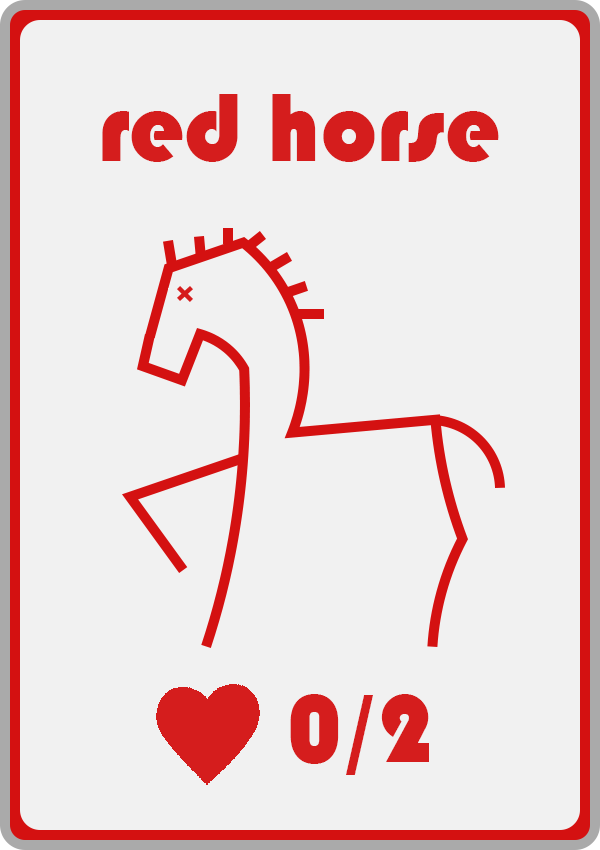
<style>
.page{position:relative;width:600px;height:850px;background:#f1f1f1}
.page>*{position:absolute;margin:0}
.t1{font:100px "Bauhaus93";color:#d51d1d}
</style>
<div class="page">
<p class="t1" style="left:102px;top:94px;width:397px;height:68px">red horse</p>
<p class="t1" style="left:290px;top:694px;width:139px;height:81px">0/2</p>
</div>
